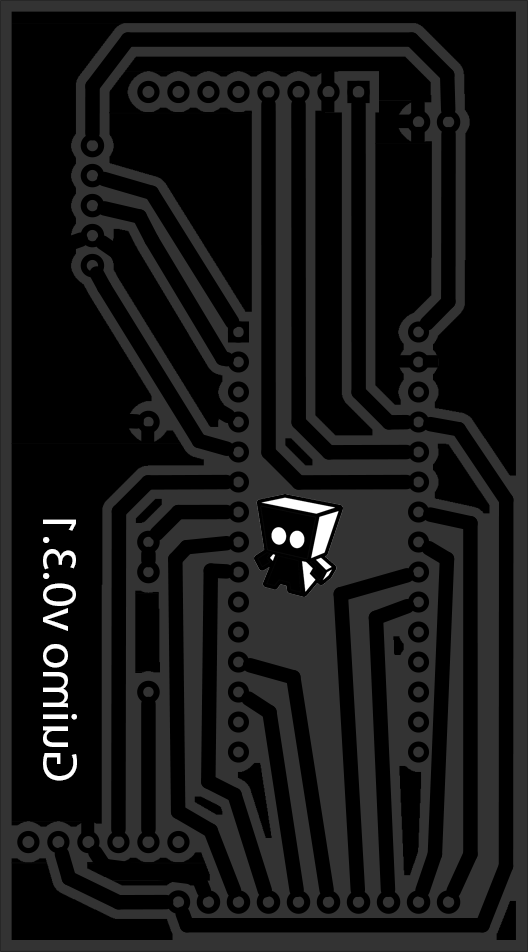
<style>
.page{position:relative;width:528px;height:952px;background:#000000}
.page>*{position:absolute;margin:0}
.t1{font:11.9px "MyriadPro-Regular";color:#ffffff}
</style>
<div class="page">
<p class="t1" style="left:43px;top:519px;width:34px;height:262px;rotate:-90deg">Guimo v0.3.1</p>
</div>
